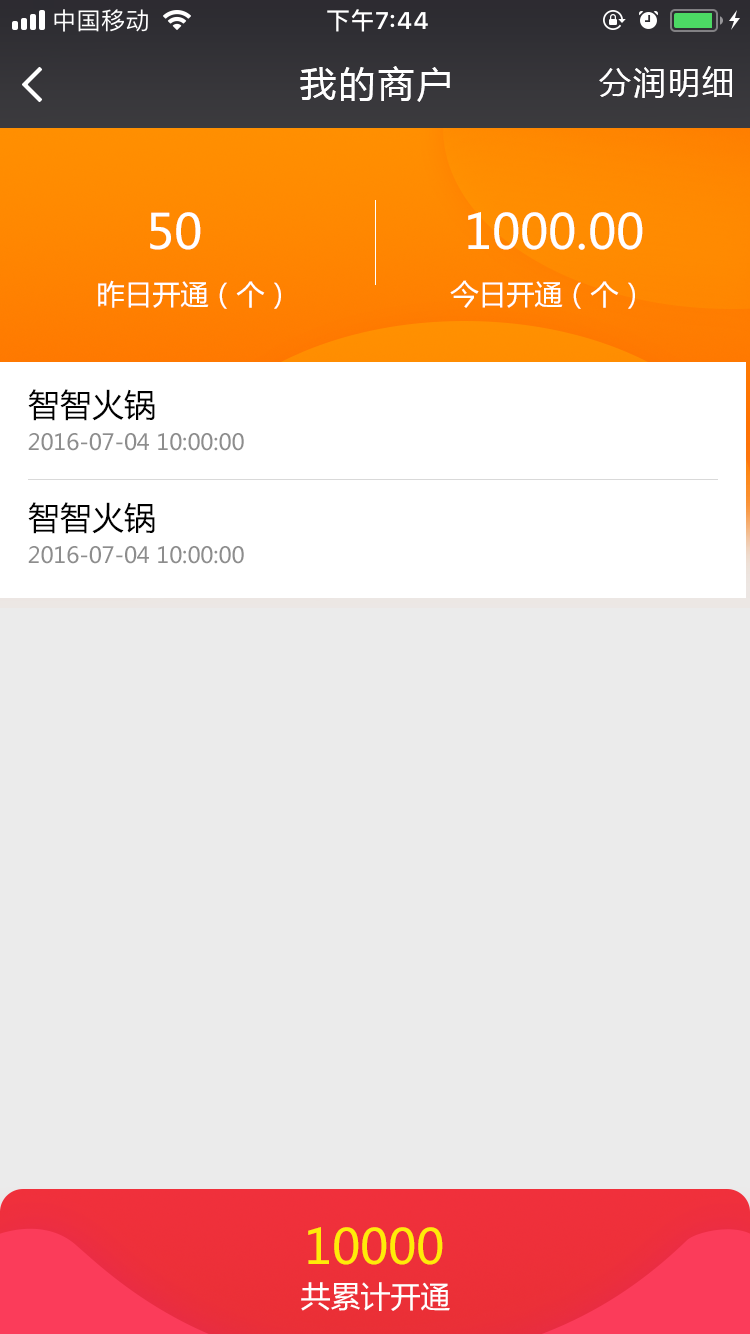
<style>
.page{position:relative;width:750px;height:1334px;background:#ebebeb}
.page>*{position:absolute;margin:0}
.t1{font:36px "MicrosoftYaHei";letter-spacing:0.08em;color:#ffffff}
.t2{font:32px "MicrosoftYaHei";letter-spacing:0.08em;color:#ffffff}
.t3{font:48px "MicrosoftYaHei";color:#ffffff}
.t4{font:28px "MicrosoftYaHei";color:#ffffff}
.t5{font:32px "MicrosoftYaHei";color:#000000}
.t6{font:22px "MicrosoftYaHei";color:#8d8d8d}
.t7{font:48px "MicrosoftYaHei";color:#ffeb08}
.t8{font:30px "MicrosoftYaHei";color:#ffffff}
</style>
<div class="page">
<p class="t1" style="left:300px;top:66px;width:150px;height:36px">我的商户</p>
<p class="t2" style="left:599px;top:66px;width:133px;height:32px">分润明细</p>
<p class="t3" style="left:150px;top:212px;width:51px;height:38px">50</p>
<p class="t3" style="left:468px;top:212px;width:175px;height:38px">1000.00</p>
<p class="t4" style="left:98px;top:280px;width:183px;height:29px">昨日开通（个）</p>
<p class="t4" style="left:450px;top:280px;width:185px;height:29px">今日开通（个）</p>
<p class="t5" style="left:28px;top:389px;width:127px;height:32px">智智火锅</p>
<p class="t6" style="left:28px;top:433px;width:216px;height:18px">2016-07-04 10:00:00</p>
<p class="t5" style="left:28px;top:502px;width:127px;height:32px">智智火锅</p>
<p class="t6" style="left:28px;top:546px;width:216px;height:18px">2016-07-04 10:00:00</p>
<p class="t7" style="left:308px;top:1227px;width:135px;height:38px">10000</p>
<p class="t8" style="left:301px;top:1282px;width:149px;height:29px">共累计开通</p>
</div>
